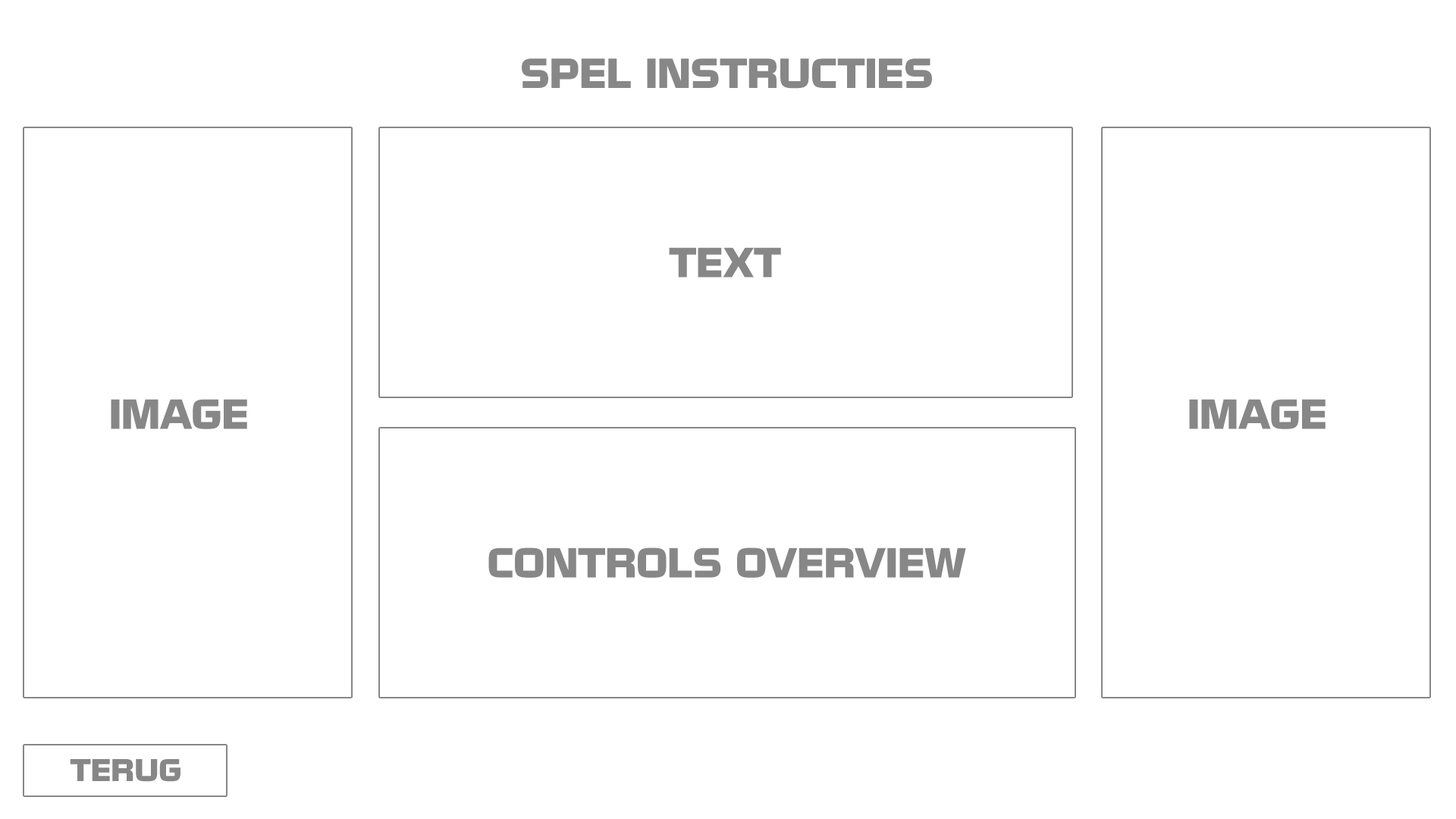
<style>
.page{position:relative;width:1456px;height:819px;background:#ffffff}
.page>*{position:absolute;margin:0}
.t1{font:36.4px "NissanOpti";color:#878787}
.t2{font:27.3px "NissanOpti";color:#878787}
</style>
<div class="page">
<p class="t1" style="left:522px;top:58px;width:410px;height:31px">SPEL INSTRUCTIES</p>
<p class="t1" style="left:669px;top:247px;width:112px;height:31px">TEXT</p>
<p class="t1" style="left:111px;top:399px;width:136px;height:30px">IMAGE</p>
<p class="t1" style="left:1189px;top:399px;width:137px;height:30px">IMAGE</p>
<p class="t1" style="left:488px;top:548px;width:478px;height:30px">CONTROLS OVERVIEW</p>
<p class="t2" style="left:70px;top:759px;width:110px;height:23px">TERUG</p>
</div>
